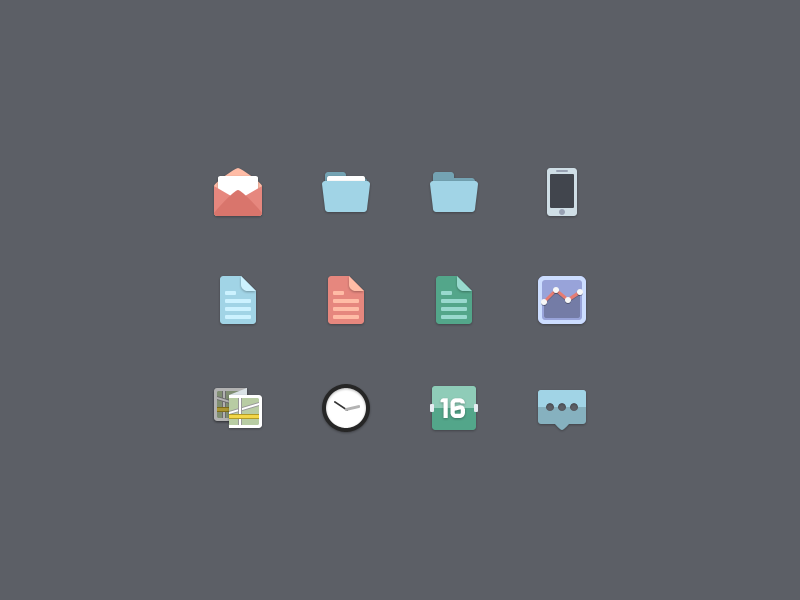
<style>
.page{position:relative;width:800px;height:600px;background:#5c5f66}
.page>*{position:absolute;margin:0}
.t1{font:33px "Bender";color:#ffffff}
</style>
<div class="page">
<p class="t1" style="left:440px;top:398px;width:25px;height:20px">16</p>
</div>
